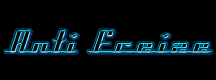
<style>
.page{position:relative;width:216px;height:80px;background:#000000}
.page>*{position:absolute;margin:0}
.t1{font:36px "AmericanaDreamsExpanded"}
</style>
<div class="page">
<p class="t1" style="left:5px;top:30px;width:207px;height:23px">Anti Freize</p>
</div>
